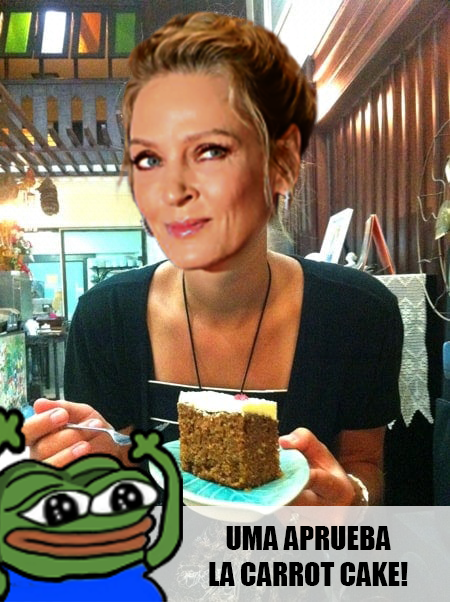
<style>
.page{position:relative;width:450px;height:602px}
.page>*{position:absolute;margin:0}
.t1{font:30px "Impact";color:#000000}
</style>
<div class="page">
<p class="t1" style="left:209px;top:526px;width:199px;height:60px;text-align:center">UMA APRUEBA<br>LA CARROT CAKE!</p>
</div>
